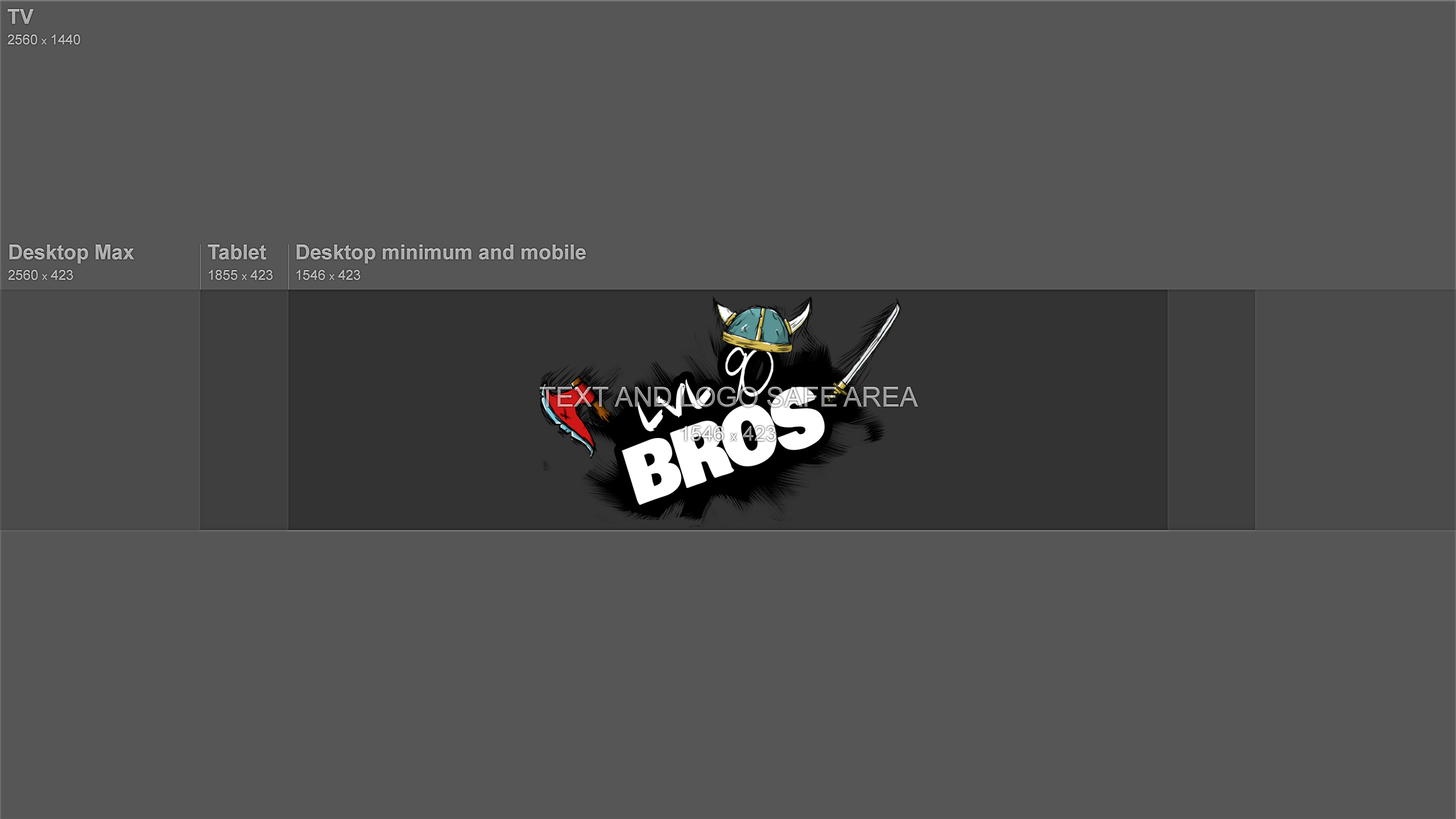
<style>
.page{position:relative;width:1456px;height:819px;background:#565656}
.page>*{position:absolute;margin:0}
.t1{font:13.6px/20.5px "ArialMT";color:#bababa}
.t2{font:20.5px/20.5px "Arial-BoldMT";color:#bababa}
.t3{font:10.2px/20.5px "ArialMT";color:#bababa}
.t4{font:20.5px/20.5px "Arial-BoldMT";color:#b1b1b1}
.t5{font:13.6px/20.5px "ArialMT";color:#b1b1b1}
.t6{font:10.2px/20.5px "ArialMT";color:#b1b1b1}
.t7{font:20.5px/20.5px "Arial-BoldMT";color:#b6b6b6}
.t8{font:13.6px/20.5px "ArialMT";color:#b6b6b6}
.t9{font:10.2px/20.5px "ArialMT";color:#b6b6b6}
.t10{font:20.5px "Arial-BoldMT";color:#b1b1b1}
</style>
<div class="page">
<p class="t1" style="left:7px;top:9px;width:73px;height:36px"><span class="t2">TV<br></span>2560 <span class="t3">x</span> 1440</p>
<p class="t4" style="left:8px;top:245px;width:126px;height:35px">Desktop Max<br><span class="t5">2560 </span><span class="t6">x</span><span class="t5"> 423</span></p>
<p class="t7" style="left:208px;top:245px;width:65px;height:35px">Tablet<br><span class="t8">1855 </span><span class="t9">x</span><span class="t8"> 423</span></p>
<p class="t10" style="left:296px;top:245px;width:290px;height:35px">Desktop minimum and mobile<span class="t4"><br></span><span class="t5">1546 </span><span class="t6">x</span><span class="t5"> 423</span></p>
</div>
